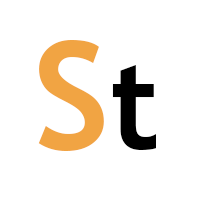
<style>
.page{position:relative;width:200px;height:200px;background:#ffffff}
.page>*{position:absolute;margin:0}
.t1{font:150px "TrebuchetMS-Bold";color:#f1a443}
.t2{font:125px "TrebuchetMS-Bold";color:#000000}
</style>
<div class="page">
<p class="t1" style="left:38px;top:40px;width:118px;height:111px">S<span class="t2">t</span></p>
</div>
